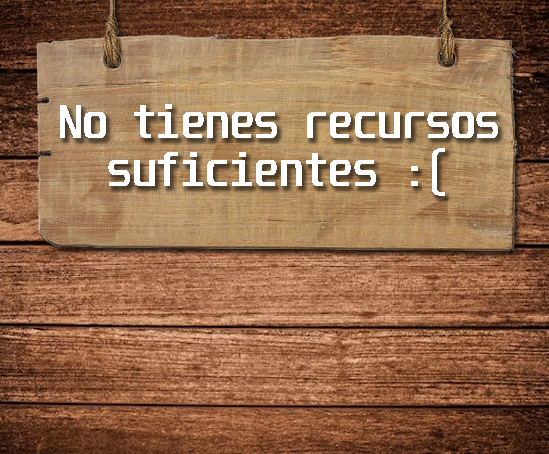
<style>
.page{position:relative;width:549px;height:454px}
.page>*{position:absolute;margin:0}
.t1{font:40.1px "Unispace-Bold";color:#ffffff}
</style>
<div class="page">
<p class="t1" style="left:60px;top:104px;width:438px;height:92px;text-align:center">No tienes recursos<br>suficientes :(</p>
</div>
